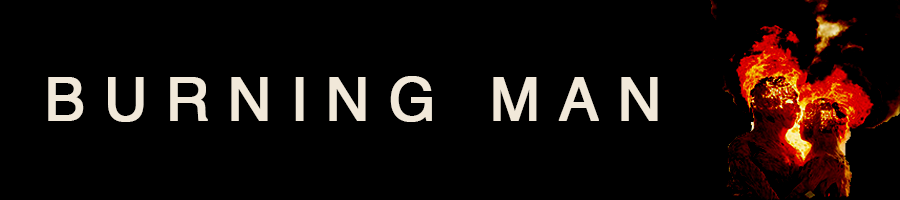
<style>
.page{position:relative;width:900px;height:200px;background:#000000}
.page>*{position:absolute;margin:0}
.t1{font:60px "Helvetica";letter-spacing:0.29em;color:#f1e8d9;font-weight:bold}
</style>
<div class="page">
<p class="t1" style="left:48px;top:76px;width:610px;height:46px">BURNING MAN</p>
</div>
